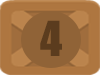
<style>
.page{position:relative;width:100px;height:75px;background:#ae7640}
.page>*{position:absolute;margin:0}
.t1{font:44.4px "Impact";letter-spacing:0.009em;color:#5b3c1e}
</style>
<div class="page">
<p class="t1" style="left:40px;top:20px;width:22px;height:36px">4</p>
</div>
